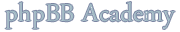
<style>
.page{position:relative;width:180px;height:32px;background:#ffffff}
.page>*{position:absolute;margin:0}
.t1{font:36px "ArabicTypesetting";color:#9bb6c1}
</style>
<div class="page">
<p class="t1" style="left:5px;top:2px;width:170px;height:27px">phpBB Academy</p>
</div>
